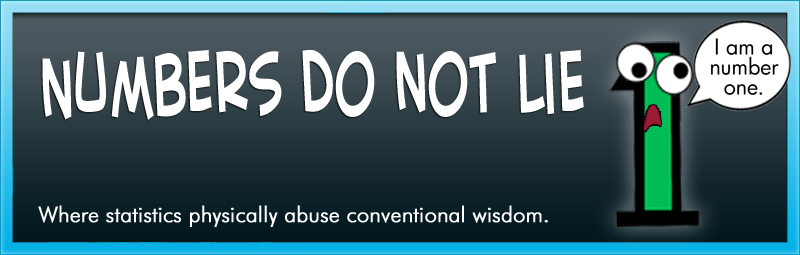
<style>
.page{position:relative;width:800px;height:255px}
.page>*{position:absolute;margin:0}
.t1{font:21.3px/20px "FuturaBk";color:#000000}
.t2{font:100px "CreativeBlockBB";color:#ffffff;scale:0.58 1}
.t3{font:21.7px "FuturaBT-Light";letter-spacing:-0.01em;color:#ffffff;font-weight:bold}
</style>
<div class="page">
<p class="t1" style="left:711px;top:38px;width:68px;height:57px;text-align:center">I am a <br>number <br>one.</p>
<p class="t2" style="left:42px;top:50px;width:542px;height:70px">Numbers Do not Lie</p>
<p class="t3" style="left:38px;top:205px;width:510px;height:22px">Where statistics physically abuse conventional wisdom.</p>
</div>
